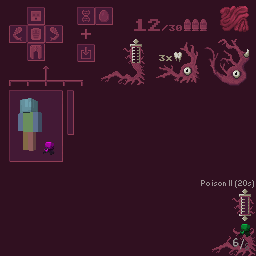
<style>
.page{position:relative;width:256px;height:256px;background:#301020}
.page>*{position:absolute;margin:0}
.t1{font:16px "AtariClassic-Regular";letter-spacing:-0.1em;color:#7f354e}
.t2{font:8px "AtariClassic-Regular";letter-spacing:-0.1em;color:#7f354e}
.t3{font:8px "AtariClassic-Regular";letter-spacing:-0.1em;color:#989378}
.t4{font:8px "Small Fonts";letter-spacing:0.01em;color:#a19a9b}
</style>
<div class="page">
<p class="t1" style="left:134px;top:19px;width:26px;height:12px">12</p>
<p class="t2" style="left:162px;top:25px;width:20px;height:6px">/30</p>
<p class="t3" style="left:159px;top:55px;width:13px;height:6px">3x</p>
<p class="t4" style="left:201px;top:180px;width:53px;height:8px">Poison II (20s)</p>
</div>
